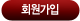
<style>
.page{position:relative;width:80px;height:21px}
.page>*{position:absolute;margin:0}
.t1{font:12px "YDIYGO330";letter-spacing:-0.05em;color:#ffffff;scale:0.9 1}
</style>
<div class="page">
<p class="t1" style="left:21px;top:4px;width:38px;height:11px">회원가입</p>
</div>
